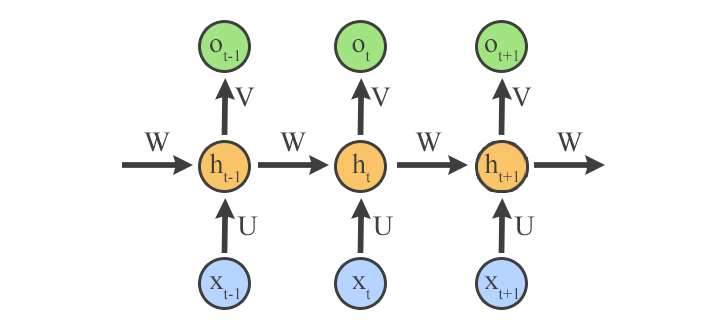
<style>
.page{position:relative;width:720px;height:324px;background:#ffffff}
.page>*{position:absolute;margin:0}
.t1{font:28.1px "TimesNewRomanPSMT";color:#3e3e3e}
</style>
<div class="page">
<p class="t1" style="left:210px;top:39px;width:30px;height:23px">ot-1</p>
<p class="t1" style="left:352px;top:39px;width:18px;height:23px">ot</p>
<p class="t1" style="left:485px;top:39px;width:33px;height:23px">ot+1</p>
<p class="t1" style="left:234px;top:87px;width:21px;height:20px">V</p>
<p class="t1" style="left:370px;top:87px;width:21px;height:20px">V</p>
<p class="t1" style="left:511px;top:87px;width:21px;height:20px">V</p>
<p class="t1" style="left:144px;top:132px;width:26px;height:20px">W</p>
<p class="t1" style="left:280px;top:132px;width:26px;height:20px">W</p>
<p class="t1" style="left:415px;top:132px;width:27px;height:20px">W</p>
<p class="t1" style="left:556px;top:132px;width:27px;height:20px">W</p>
<p class="t1" style="left:210px;top:153px;width:30px;height:30px">ht-1</p>
<p class="t1" style="left:352px;top:153px;width:19px;height:30px">ht</p>
<p class="t1" style="left:485px;top:153px;width:34px;height:30px">ht+1</p>
<p class="t1" style="left:237px;top:216px;width:21px;height:20px">U</p>
<p class="t1" style="left:373px;top:216px;width:20px;height:20px">U</p>
<p class="t1" style="left:514px;top:216px;width:21px;height:20px">U</p>
<p class="t1" style="left:209px;top:276px;width:31px;height:24px">xt-1</p>
<p class="t1" style="left:352px;top:276px;width:19px;height:24px">xt</p>
<p class="t1" style="left:484px;top:276px;width:35px;height:24px">xt+1</p>
</div>
